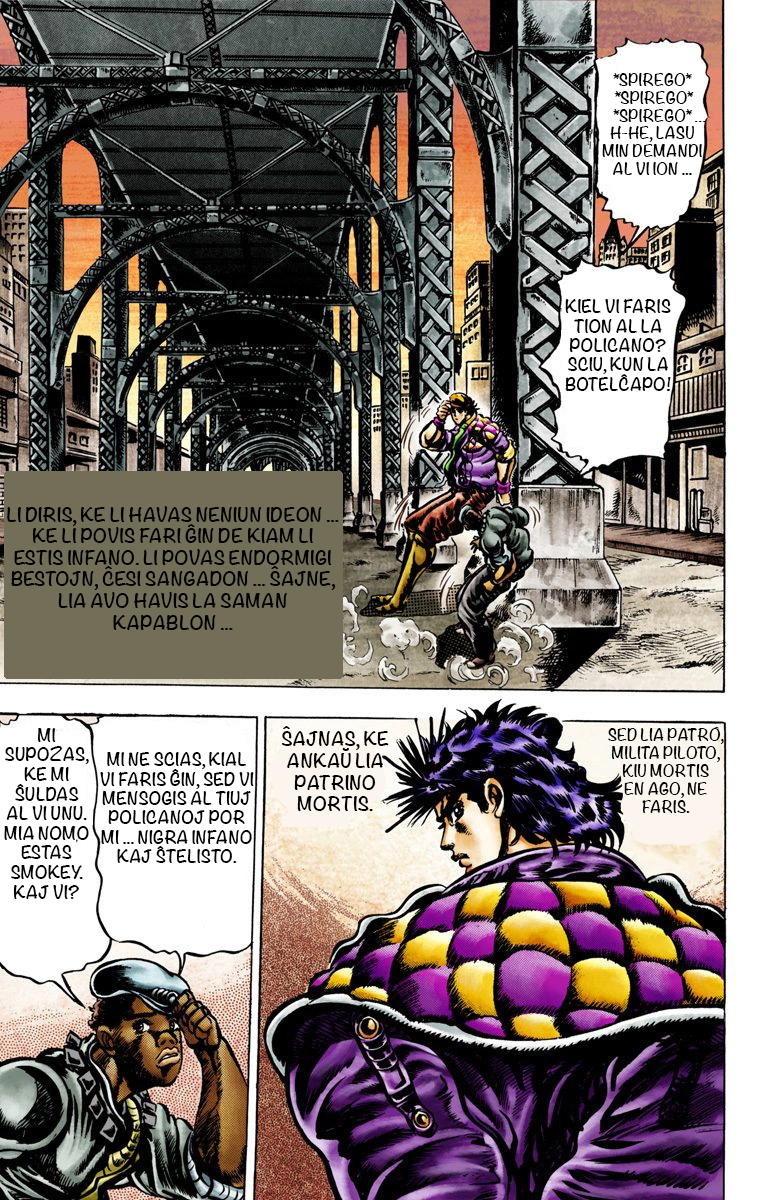
<style>
.page{position:relative;width:780px;height:1200px}
.page>*{position:absolute;margin:0}
.t1{font:14.9px "Noteworthy-Bold";color:#000000}
.t2{font:16.1px "Noteworthy-Bold";color:#000000}
.t3{font:18px "Noteworthy-Bold";color:#000000}
.t4{font:16.3px "Noteworthy-Bold";color:#000000}
.t5{font:16.2px "Noteworthy-Bold";color:#000000}
</style>
<div class="page">
<p class="t1" style="left:602px;top:73px;width:104px;height:102px;text-align:center">*SPIREGO*<br> *SPIREGO*<br>     *SPIREGO* …<br>H-HE, LASU <br>MIN DEMANDI <br>AL VI ION ...</p>
<p class="t2" style="left:565px;top:299px;width:106px;height:92px;text-align:center">KIEL VI FARIS TION AL LA POLICANO? SCIU, KUN LA BOTELĈAPO!</p>
<p class="t3" style="left:7px;top:506px;width:332px;height:124px;text-align:center">LI DIRIS, KE LI HAVAS NENIUN IDEON ... KE LI POVIS FARI ĜIN DE KIAM LI ESTIS INFANO. LI POVAS ENDORMIGI BESTOJN, ĈESI SANGADON ... ŜAJNE, LIA AVO HAVIS LA SAMAN KAPABLON ...</p>
<p class="t3" style="left:281px;top:726px;width:108px;height:85px;text-align:center">ŜAJNAS, KE ANKAŬ LIA PATRINO MORTIS.</p>
<p class="t4" style="left:4px;top:728px;width:85px;height:171px;text-align:center">MI SUPOZAS, KE MI ŜULDAS AL VI UNU. MIA NOMO ESTAS SMOKEY. KAJ VI?</p>
<p class="t1" style="left:608px;top:728px;width:116px;height:85px;text-align:center">SED LIA PATRO, MILITA PILOTO, KIU MORTIS <br>EN AGO, NE FARIS.</p>
<p class="t5" style="left:100px;top:752px;width:154px;height:111px;text-align:center">MI NE SCIAS, KIAL VI FARIS ĜIN, SED VI MENSOGIS AL TIUJ POLICANOJ POR MI ... NIGRA INFANO KAJ ŜTELISTO.</p>
</div>
